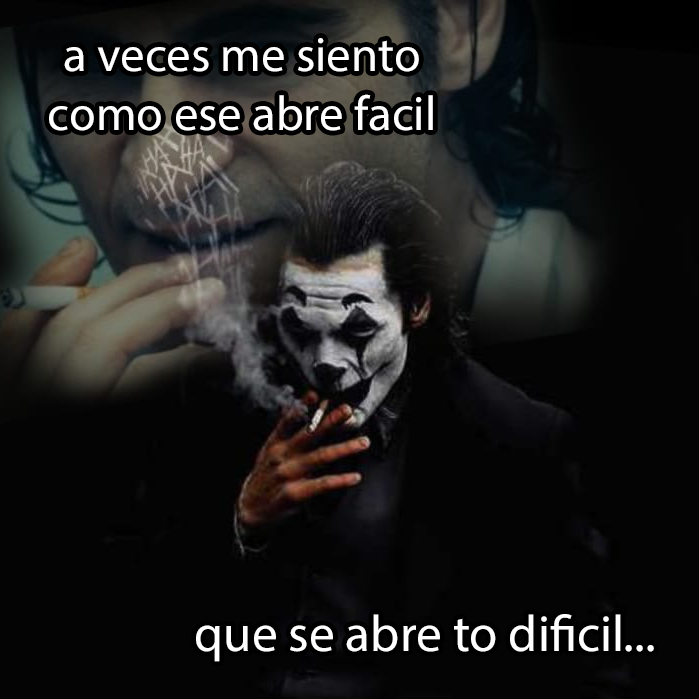
<style>
.page{position:relative;width:699px;height:699px;background:#040404}
.page>*{position:absolute;margin:0}
.t1{font:48.8px "MyriadPro-Regular";color:#ffffff}
.t2{font:51.5px "MyriadPro-Regular";color:#ffffff}
</style>
<div class="page">
<p class="t1" style="left:49px;top:38px;width:384px;height:93px;text-align:center">a veces me siento<br>como ese abre facil</p>
<p class="t2" style="left:196px;top:614px;width:458px;height:48px">que se abre to dificil...</p>
</div>
